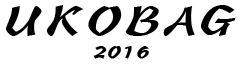
<style>
.page{position:relative;width:240px;height:66px;background:#ffffff}
.page>*{position:absolute;margin:0}
.t1{font:60px "STBaoli-SC-Regular";letter-spacing:0.01em;color:#000000}
.t2{font:24px "STBaoli-SC-Regular";letter-spacing:0.01em;color:#000000;font-weight:bold}
</style>
<div class="page">
<p class="t1" style="left:6px;top:5px;width:230px;height:31px">UKOBAG</p>
<p class="t2" style="left:93px;top:46px;width:56px;height:13px">2016</p>
</div>
